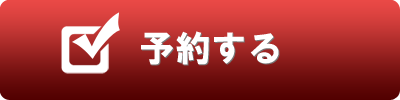
<style>
.page{position:relative;width:400px;height:100px}
.page>*{position:absolute;margin:0}
.t1{font:36px "HGSSoeiKakugothicUB";color:#ffffff}
</style>
<div class="page">
<p class="t1" style="left:141px;top:31px;width:138px;height:34px">予約する</p>
<p class="t1" style="left:142px;top:32px;width:138px;height:34px">予約する</p>
</div>
